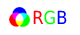
<style>
.page{position:relative;width:80px;height:35px;background:#ffffff}
.page>*{position:absolute;margin:0}
.t1{font:18px "DejaVuSansCondensed";color:#ff0000}
.t2{font:18px "DejaVuSansCondensed";color:#00ff00}
.t3{font:18px "DejaVuSansCondensed";color:#0000ff}
</style>
<div class="page">
<p class="t1" style="left:33px;top:10px;width:34px;height:15px">R<span class="t2">G</span><span class="t3">B</span></p>
</div>
